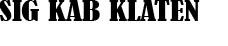
<style>
.page{position:relative;width:228px;height:46px;background:#ffffff}
.page>*{position:absolute;margin:0}
.t1{font:25.9px "BernardMT-Condensed";color:#000000;scale:1.3 1}
</style>
<div class="page">
<p class="t1" style="left:0px;top:0px;width:200px;height:21px">SIG KAB KLATEN</p>
</div>
